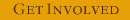
<style>
.page{position:relative;width:130px;height:20px;background:#e6a109}
.page>*{position:absolute;margin:0}
.t1{font:12.5px "Garamond";color:#4c290d}
.t2{font:16.7px "Garamond";color:#4c290d}
</style>
<div class="page">
<p class="t1" style="left:13px;top:3px;width:106px;height:12px"><span class="t2">G </span>E T <span class="t2">I </span>N V O L V E D</p>
</div>
